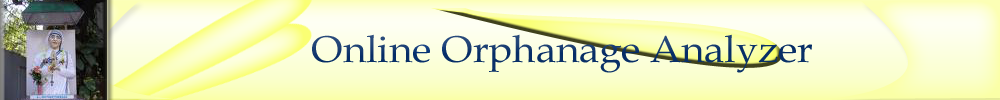
<style>
.page{position:relative;width:1000px;height:100px}
.page>*{position:absolute;margin:0}
.t1{font:37.5px "BookAntiqua";color:#093068;scale:1.06 1}
</style>
<div class="page">
<p class="t1" style="left:312px;top:34px;width:500px;height:39px">Online Orphanage Analyzer</p>
</div>
